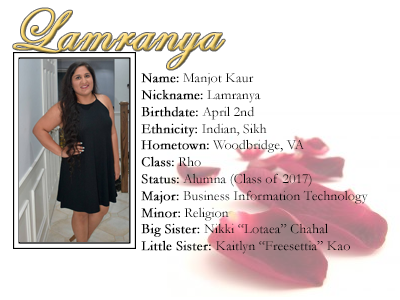
<style>
.page{position:relative;width:400px;height:300px;background:#ffffff}
.page>*{position:absolute;margin:0}
.t1{font:60px "EdwardianScriptITC";font-weight:bold}
.t2{font:14px "Garamond";color:#000000}
.t3{font:14px "Garamond";color:#000000;font-weight:bold}
</style>
<div class="page">
<p class="t1" style="left:13px;top:8px;width:212px;height:62px">Lamranya</p>
<p class="t2" style="left:141px;top:73px;width:227px;height:181px"><span class="t3">Name:</span> Manjot Kaur<br><span class="t3">Nickname:</span> Lamranya<br><span class="t3">Birthdate:</span> April 2nd<br><span class="t3">Ethnicity:</span> Indian, Sikh<br><span class="t3">Hometown:</span> Woodbridge, VA<br><span class="t3">Class:</span> Rho<br><span class="t3">Status:</span> Alumna (Class of 2017)<br><span class="t3">Major:</span> Business Information Technology<br><span class="t3">Minor:</span> Religion<br><span class="t3">Big Sister: </span>Nikki “Lotaea” Chahal<br><span class="t3">Little Sister: </span>Kaitlyn “Freesettia” Kao</p>
</div>
